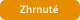
<style>
.page{position:relative;width:80px;height:20px;background:#e68d00}
.page>*{position:absolute;margin:0}
.t1{font:11px "MyriadPro-Semibold";color:#ffffff}
</style>
<div class="page">
<p class="t1" style="left:20px;top:5px;width:38px;height:8px">Zhrnuté</p>
</div>
